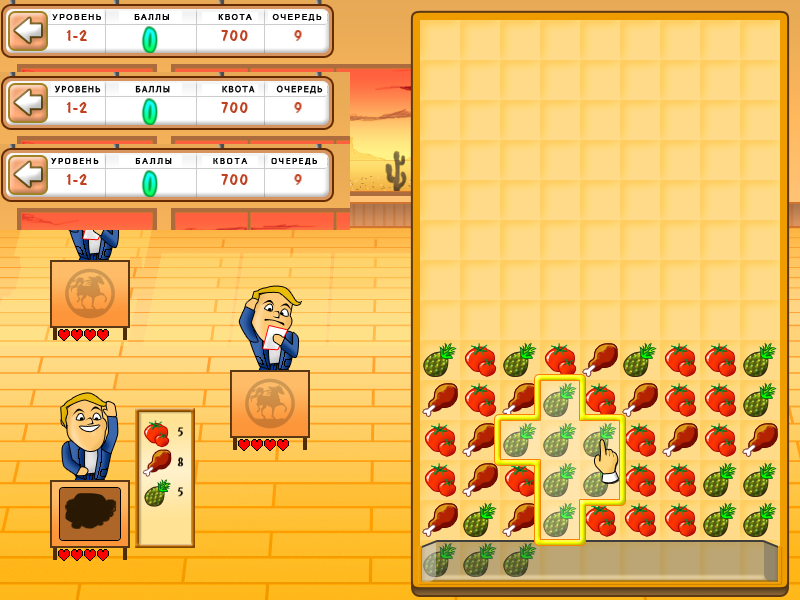
<style>
.page{position:relative;width:800px;height:600px}
.page>*{position:absolute;margin:0}
.t1{font:8.2px "ArialMT";letter-spacing:0.175em;color:#000000;font-weight:bold}
.t2{font:8.2px "Tahoma";letter-spacing:0.175em;color:#000000;font-weight:bold}
.t3{font:8.2px "Univers-Medium";letter-spacing:0.175em;color:#000000;font-weight:bold}
</style>
<div class="page">
<p class="t1" style="left:52px;top:14px;width:270px;height:7px">УРОВЕНЬ        БАЛЛЫ            КВОТА     ОЧЕРЕДЬ</p>
<p class="t2" style="left:54px;top:85px;width:269px;height:9px">УРОВЕНЬ        БАЛЛЫ            КВОТА     ОЧЕРЕДЬ</p>
<p class="t3" style="left:51px;top:158px;width:266px;height:7px">УРОВЕНЬ        БАЛЛЫ         КВОТА     ОЧЕРЕДЬ</p>
</div>
